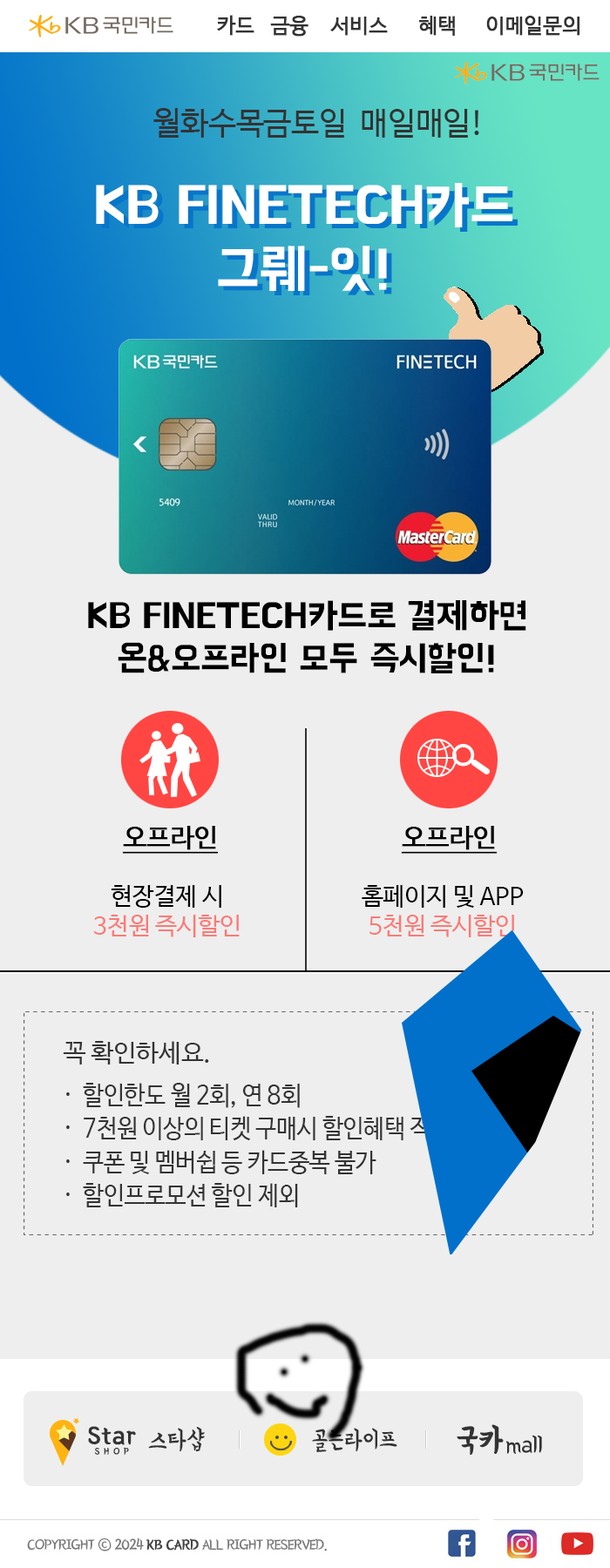
<style>
.page{position:relative;width:610px;height:1568px;background:#eeeeee}
.page>*{position:absolute;margin:0}
.t1{font:20.9px "NanumBarunGothic";letter-spacing:-0.01em;color:#323232;font-weight:bold}
.t2{font:31.4px "NanumBarunGothic";letter-spacing:-0.01em;color:#333333}
.t3{font:53.4px "BMHANNAPro";letter-spacing:-0.01em;color:#ffffff}
.t4{font:35.6px "BMHANNAPro";letter-spacing:-0.01em;color:#000000}
.t5{font:26.1px "NanumBarunGothic";letter-spacing:-0.01em;color:#000000;font-weight:bold;text-decoration:underline}
.t6{font:24.4px "NanumBarunGothic";letter-spacing:-0.01em;color:#fb7a76}
.t7{font:24.4px "NanumBarunGothic";letter-spacing:-0.01em;color:#000000}
.t8{font:25.5px "NanumBarunGothic";letter-spacing:-0.01em;color:#333333}
.t9{font:26.1px/33.4px "NanumBarunGothic";letter-spacing:-0.01em;color:#333333;scale:0.89 1}
</style>
<div class="page">
<p class="t1" style="left:217px;top:15px;width:37px;height:21px">카드</p>
<p class="t1" style="left:270px;top:16px;width:38px;height:21px">금융</p>
<p class="t1" style="left:330px;top:17px;width:58px;height:19px">서비스</p>
<p class="t1" style="left:419px;top:16px;width:36px;height:20px">혜택</p>
<p class="t1" style="left:486px;top:16px;width:93px;height:20px">이메일문의</p>
<p class="t2" style="left:153px;top:108px;width:326px;height:30px">월화수목금토일  매일매일!</p>
<p class="t3" style="left:96px;top:183px;width:416px;height:108px;text-align:center">KB FINETECH카드<br>그뤠-잇!</p>
<p class="t4" style="left:88px;top:600px;width:438px;height:73px;text-align:center">KB FINETECH카드로 결제하면<br>온&amp;오프라인 모두 즉시할인!</p>
<p class="t5" style="left:122px;top:826px;width:96px;height:28px">오프라인</p>
<p class="t5" style="left:401px;top:826px;width:96px;height:28px">오프라인</p>
<p class="t6" style="left:94px;top:885px;width:146px;height:52px;text-align:center"><span class="t7">현장결제 시<br></span>3천원 즉시할인</p>
<p class="t7" style="left:362px;top:885px;width:162px;height:52px;text-align:center">홈페이지 및 APP<br><span class="t6">5천원 즉시할인</span></p>
<p class="t8" style="left:63px;top:1041px;width:146px;height:23px">꼭 확인하세요.</p>
<p class="t9" style="left:66px;top:1083px;width:431px;height:124px">·  할인한도 월 2회, 연 8회<br>·  7천원 이상의 티켓 구매시 할인혜택 적용 가능<br>·  쿠폰 및 멤버쉽 등 카드중복 불가<br>·  할인프로모션 할인 제외</p>
</div>
